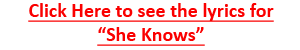
<style>
.page{position:relative;width:300px;height:50px;background:#ffffff}
.page>*{position:absolute;margin:0}
.t1{font:20px "Calibri-Bold";color:#fa0000;text-decoration:underline}
</style>
<div class="page">
<p class="t1" style="left:28px;top:3px;width:246px;height:43px;text-align:center">Click Here to see the lyrics for<br>“She Knows”</p>
</div>
